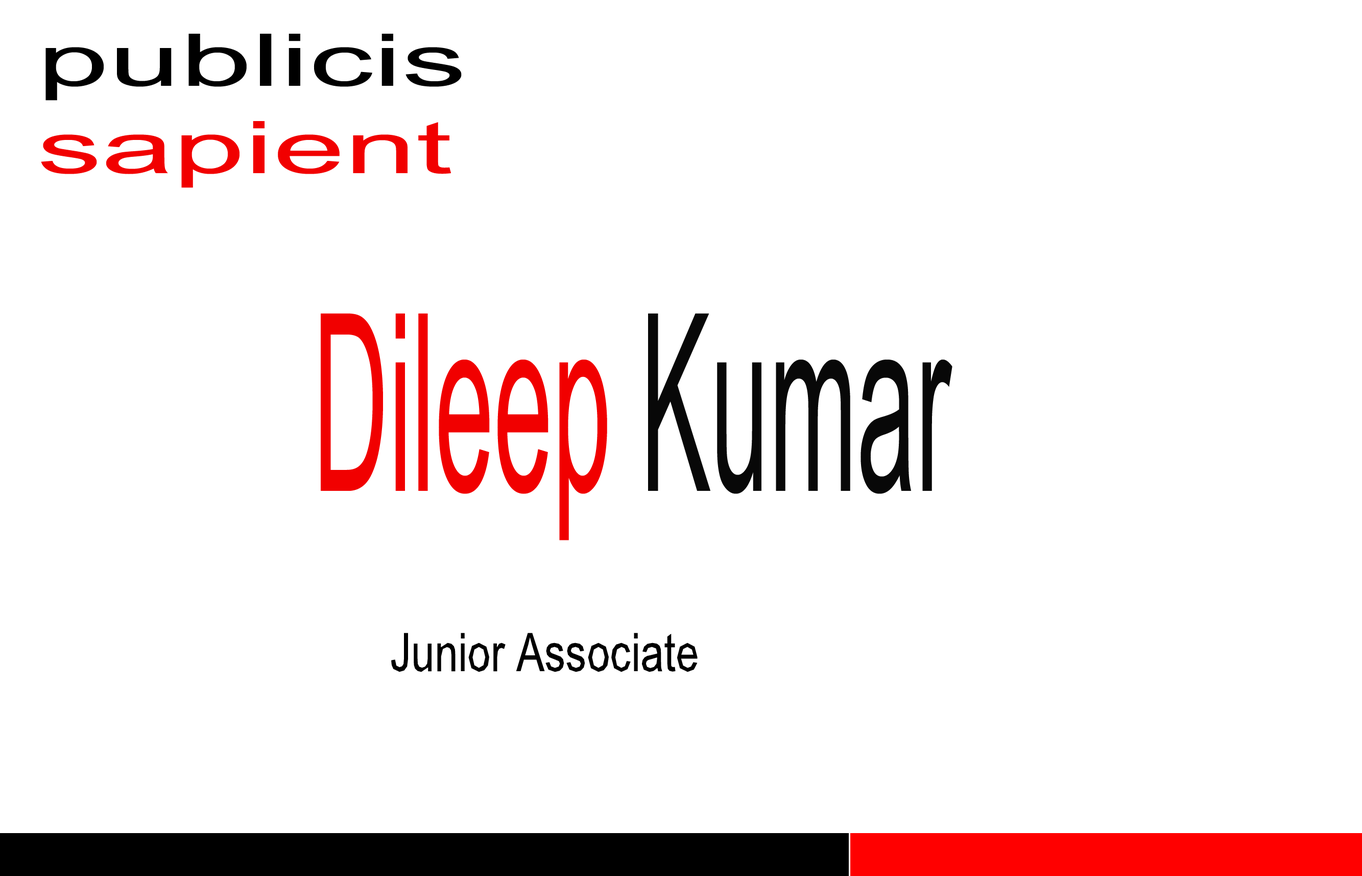
<style>
.page{position:relative;width:1362px;height:876px;background:#ffffff}
.page>*{position:absolute;margin:0}
.t1{font:72.7px "ArialMT";color:#000000;scale:1.77 1}
.t2{font:72.7px "ArialMT";color:#f10000;scale:1.77 1}
.t3{font:247.7px "ArialMT";color:#f10000;scale:0.43 1}
.t4{font:247.7px "ArialMT";color:#080808;scale:0.43 1}
.t5{font:53.2px "ArialMT";color:#000000;scale:0.79 1}
.t6{font:243.7px "ArialMT";color:#000000;scale:0.79 1}
</style>
<div class="page">
<p class="t1" style="left:41px;top:34px;width:421px;height:154px">publicis <br><span class="t2">sapient</span></p>
<p class="t3" style="left:321px;top:313px;width:631px;height:227px">Dileep <span class="t4">Kumar</span></p>
<p class="t5" style="left:391px;top:633px;width:306px;height:39px"><span class="t6"><br></span>Junior Associate</p>
</div>
